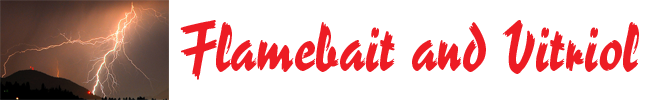
<style>
.page{position:relative;width:656px;height:100px;background:#ffffff}
.page>*{position:absolute;margin:0}
.t1{font:64px "ReporterLTStd-2";color:#ed1c24}
</style>
<div class="page">
<p class="t1" style="left:180px;top:20px;width:459px;height:60px">Flamebait and Vitriol</p>
</div>
